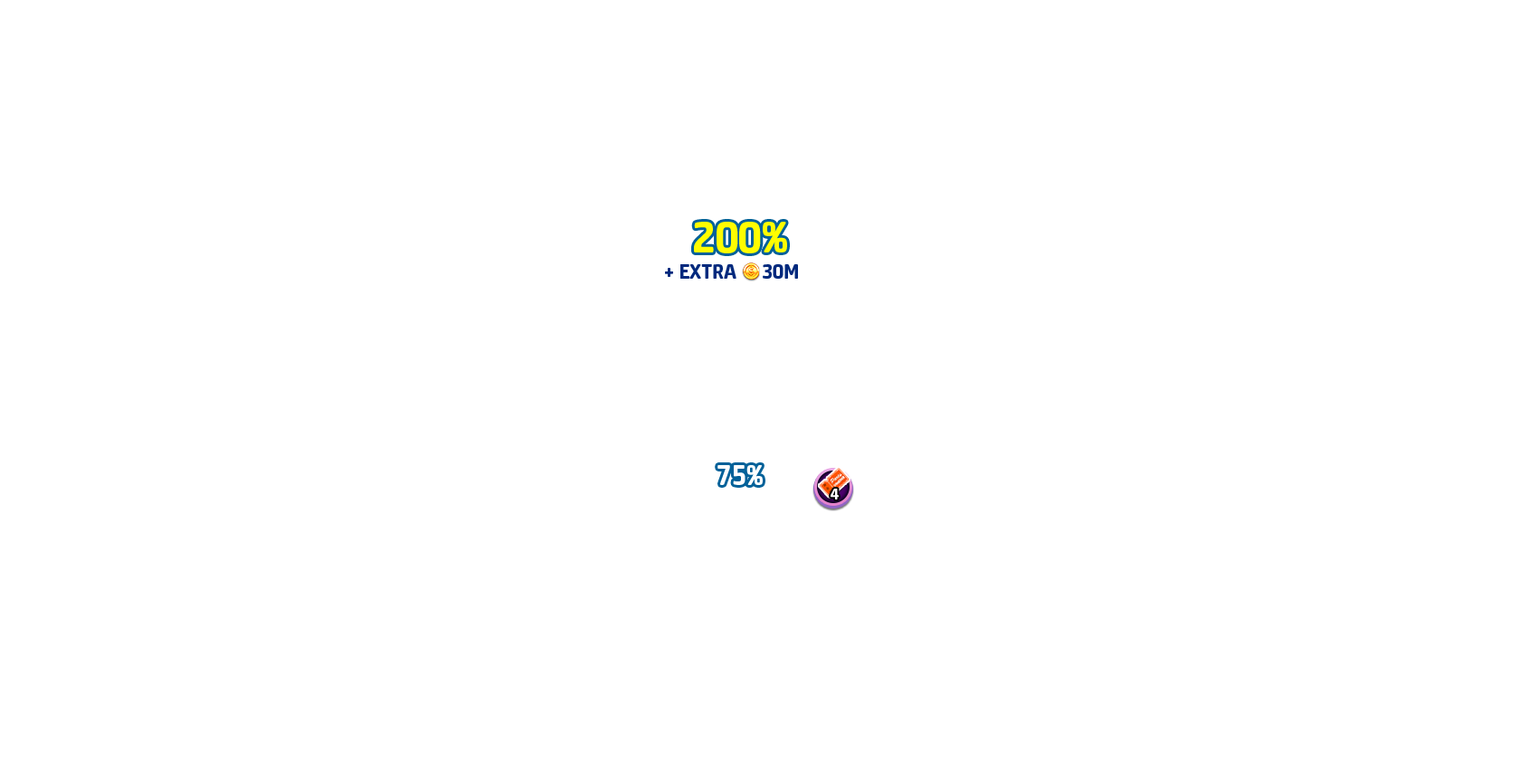
<style>
.page{position:relative;width:1529px;height:780px;background:#ffffff}
.page>*{position:absolute;margin:0}
.t1{font:49.7px "Neuron-ExtraBold";color:#fffd00;text-transform:uppercase}
.t2{font:23.5px "Neuron-ExtraBold";color:#00297d;text-transform:uppercase}
.t3{font:31.7px "Neuron-ExtraBold";color:#ffffff;text-transform:uppercase}
.t4{font:17.6px "Neuron-ExtraBold";color:#ffffff;text-transform:uppercase}
</style>
<div class="page">
<p class="t1" style="left:694px;top:222px;width:93px;height:31px">200%</p>
<p class="t2" style="left:665px;top:264px;width:133px;height:15px">+ EXTRA     30M</p>
<p class="t3" style="left:717px;top:465px;width:46px;height:20px">75%</p>
<p class="t4" style="left:831px;top:489px;width:8px;height:10px">4</p>
</div>
